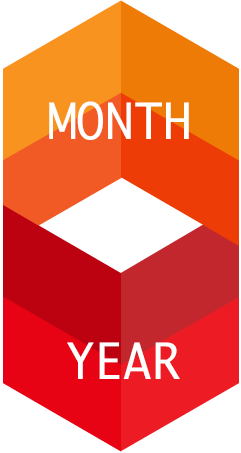
<style>
.page{position:relative;width:241px;height:453px;background:#ffffff}
.page>*{position:absolute;margin:0}
.t1{font:48px "Monaco";color:#ffffff}
</style>
<div class="page">
<p class="t1" style="left:49px;top:101px;width:140px;height:39px">MONTH</p>
<p class="t1" style="left:67px;top:342px;width:113px;height:37px">YEAR</p>
</div>
